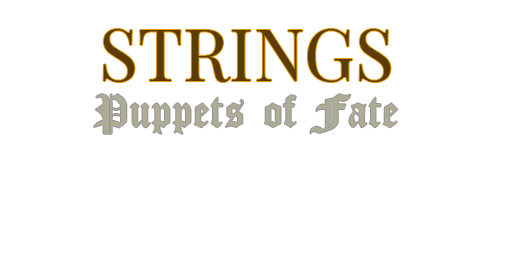
<style>
.page{position:relative;width:512px;height:256px;background:#ffffff}
.page>*{position:absolute;margin:0}
.t1{font:72px "PlayfairDisplay-Regular";color:#5b3c07}
.t2{font:48px "CloisterBlack-Light";color:#afac95}
</style>
<div class="page">
<p class="t1" style="left:103px;top:29px;width:288px;height:53px">STRINGS</p>
<p class="t2" style="left:94px;top:94px;width:304px;height:40px">Puppets of Fate</p>
</div>
